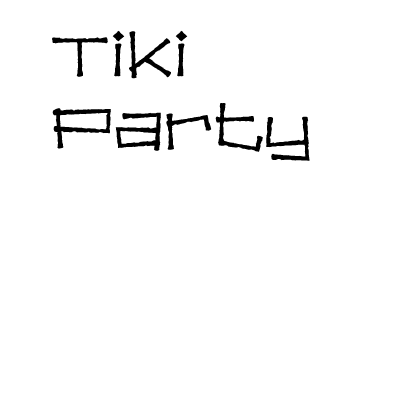
<style>
.page{position:relative;width:400px;height:400px;background:#ffffff}
.page>*{position:absolute;margin:0}
.t1{font:60px "BahamaSlim";color:#000000}
</style>
<div class="page">
<p class="t1" style="left:52px;top:30px;width:258px;height:131px">Tiki<br>Party</p>
</div>
